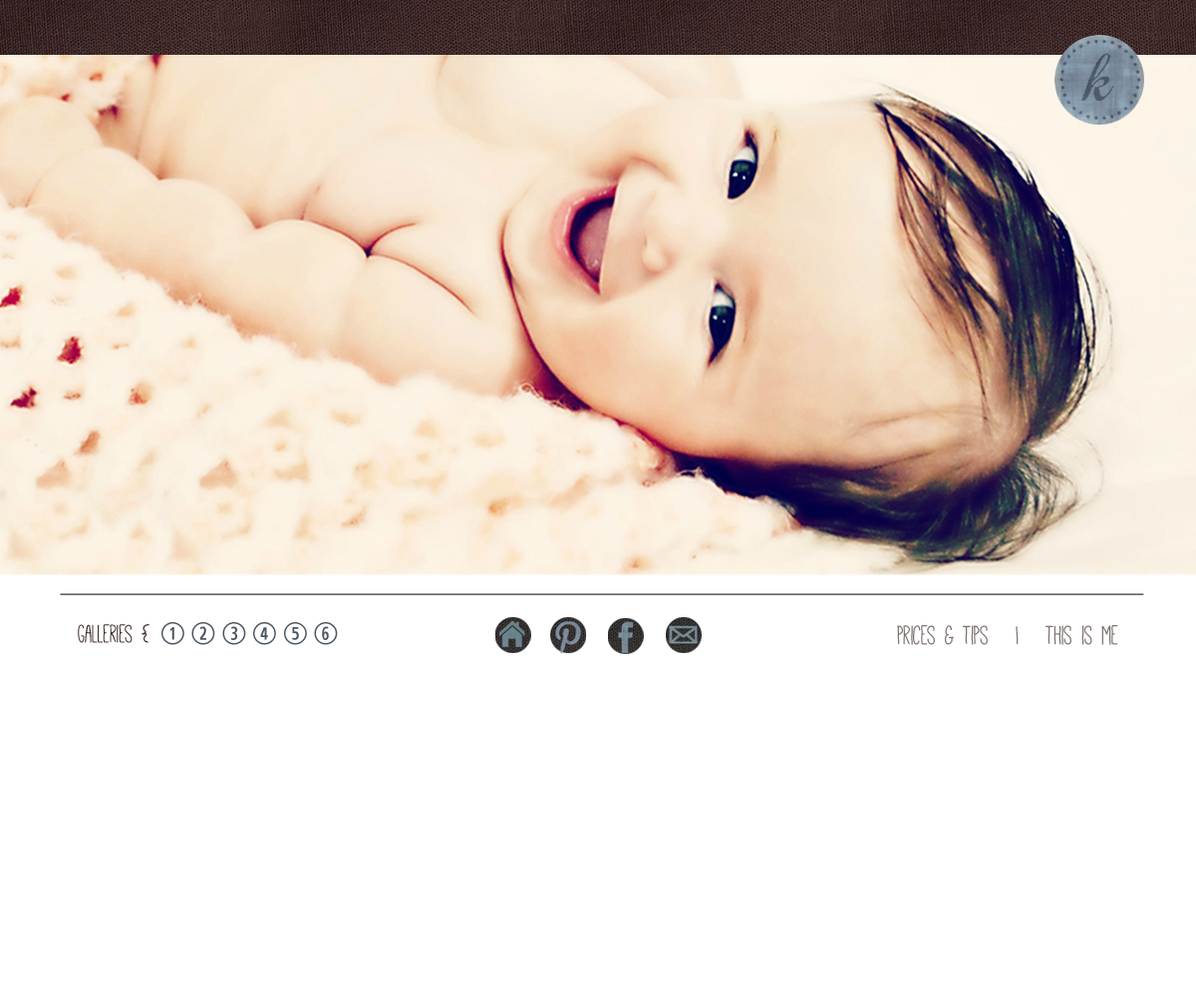
<style>
.page{position:relative;width:1196px;height:997px;background:#ffffff}
.page>*{position:absolute;margin:0}
.t1{font:27.9px "Mathlete-Bulky";color:#3a2827}
.t2{font:29.9px "Mathlete-Bulky";color:#3a2827}
.t3{font:29.9px "CombiNumeralsLtd";color:#495662}
.t4{font:29.9px "Mathlete-Bulky";color:#7f7372}
</style>
<div class="page">
<p class="t1" style="left:78px;top:624px;width:72px;height:19px">galleries<span class="t2"> {</span></p>
<p class="t3" style="left:161px;top:622px;width:177px;height:23px">q w e r t y</p>
<p class="t4" style="left:897px;top:625px;width:221px;height:20px">prices &amp; tips   |   this is me</p>
</div>
